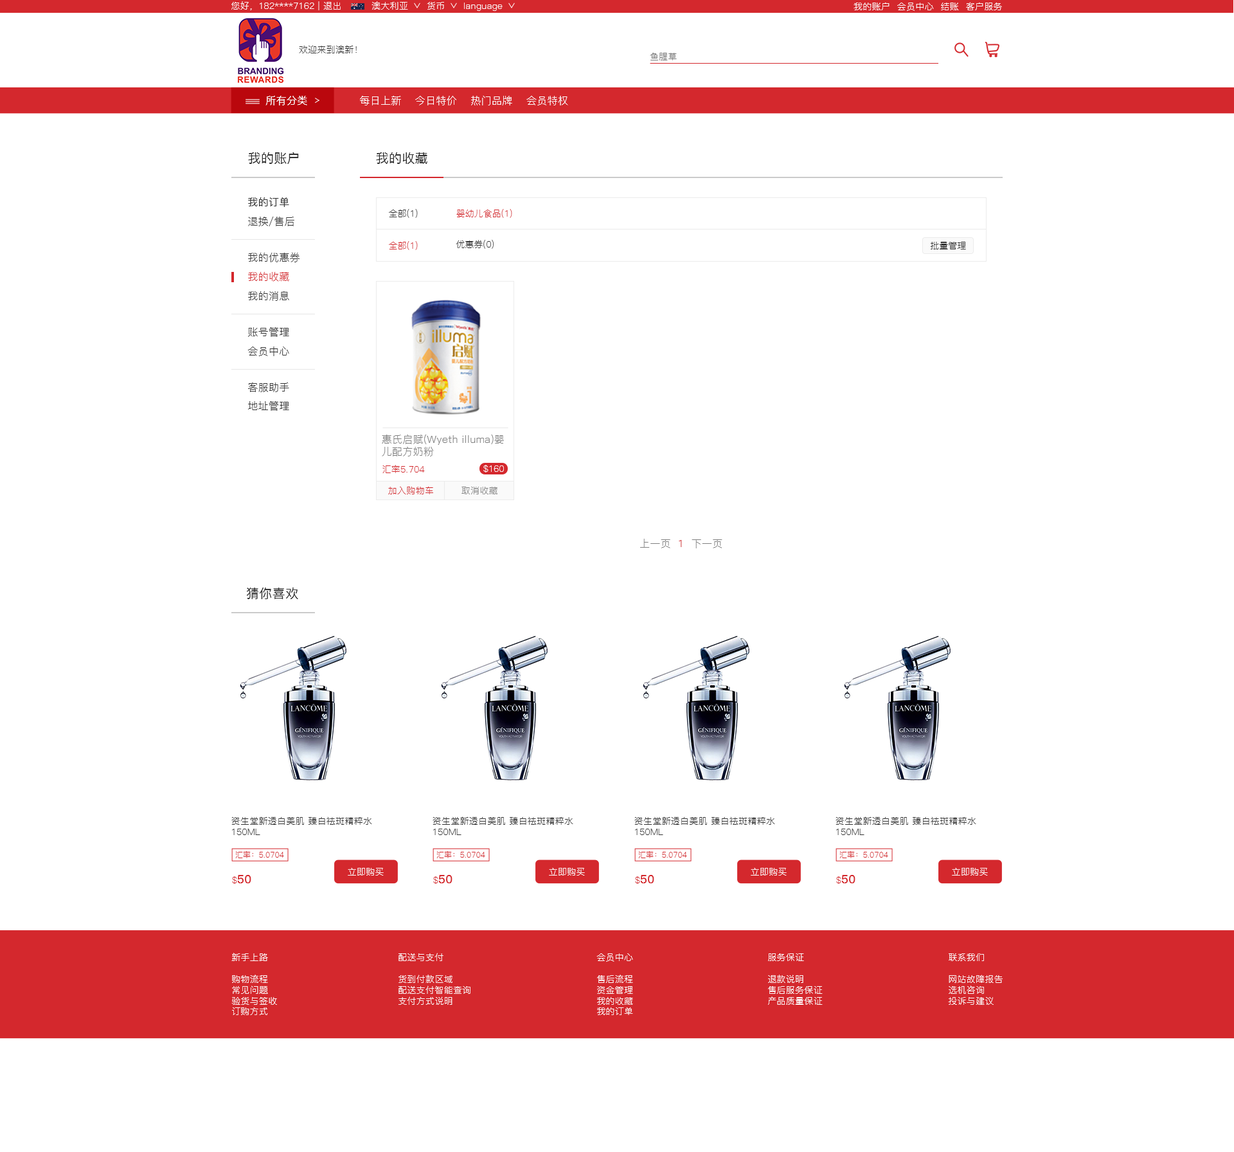
<style>
.page{position:relative;width:1234px;height:1152px;background:#ffffff}
.page>*{position:absolute;margin:0}
.t1{font:9px "PingFang-SC-Regular";letter-spacing:0.02em;color:#ffffff}
.t2{font:9px "PingFang-SC-Regular";letter-spacing:0.02em;color:#333333}
.t3{font:9px "PingFang-SC-Regular";letter-spacing:0.02em;color:#767676}
.t4{font:10.3px "PingFang-SC-Medium";letter-spacing:0.02em;color:#ffffff}
.t5{font:10.3px "PingFang-SC-Regular";letter-spacing:0.02em;color:#ffffff}
.t6{font:12.9px "PingFang-SC-Medium";letter-spacing:0.02em;color:#333333}
.t7{font:10.3px "PingFang-SC-Medium";letter-spacing:0.02em;color:#333333}
.t8{font:9px "PingFang-SC-Regular";color:#333333}
.t9{font:9px "PingFang-SC-Regular";color:#d4282d}
.t10{font:10.3px "PingFang-SC-Regular";letter-spacing:0.02em;color:#343434}
.t11{font:10.3px "PingFang-SC-Regular";letter-spacing:0.02em;color:#d4282d}
.t12{font:10.3px "PingFang-SC-Regular";letter-spacing:0.02em;color:#333333}
.t13{font:10.3px "PingFang-SC-Regular";letter-spacing:0.02em;color:#808080}
.t14{font:9px "PingFang-SC-Regular";letter-spacing:0.02em;color:#d4282d}
.t15{font:9px "PingFang-SC-Regular";letter-spacing:0.02em;color:#808080}
.t16{font:7.7px "PingFang-SC-Regular";letter-spacing:0.02em;color:#d4282d}
.t17{font:11.6px "PingFang-SC-Bold";letter-spacing:0.02em;color:#d4282d}
.t18{font:9px "PingFang-SC-Regular";letter-spacing:0.02em;color:#fffefe}
</style>
<div class="page">
<p class="t1" style="left:231px;top:1px;width:110px;height:9px">您好，182****7162 | 退出</p>
<p class="t1" style="left:372px;top:1px;width:36px;height:9px">澳大利亚</p>
<p class="t1" style="left:427px;top:2px;width:17px;height:8px">货币</p>
<p class="t1" style="left:464px;top:3px;width:39px;height:8px">language</p>
<p class="t1" style="left:854px;top:2px;width:148px;height:9px">我的账户  会员中心  结账  客户服务</p>
<p class="t2" style="left:299px;top:45px;width:58px;height:8px">欢迎来到澳新！</p>
<p class="t3" style="left:650px;top:53px;width:27px;height:7px">鱼腥草</p>
<p class="t4" style="left:266px;top:96px;width:41px;height:9px">所有分类</p>
<p class="t5" style="left:360px;top:96px;width:208px;height:9px">每日上新    今日特价    热门品牌    会员特权</p>
<p class="t6" style="left:248px;top:152px;width:51px;height:12px">我的账户</p>
<p class="t6" style="left:376px;top:152px;width:52px;height:12px">我的收藏</p>
<p class="t7" style="left:248px;top:197px;width:41px;height:10px">我的订单</p>
<p class="t8" style="left:389px;top:209px;width:29px;height:9px">全部(1)</p>
<p class="t9" style="left:456px;top:209px;width:56px;height:9px">婴幼儿食品(1)</p>
<p class="t10" style="left:248px;top:217px;width:46px;height:9px">退换/售后</p>
<p class="t9" style="left:389px;top:241px;width:29px;height:9px">全部(1)</p>
<p class="t8" style="left:456px;top:240px;width:38px;height:9px">优惠券(0)</p>
<p class="t8" style="left:931px;top:242px;width:35px;height:7px">批量管理</p>
<p class="t10" style="left:248px;top:253px;width:52px;height:9px">我的优惠券</p>
<p class="t11" style="left:248px;top:272px;width:41px;height:10px">我的收藏</p>
<p class="t10" style="left:248px;top:291px;width:41px;height:10px">我的消息</p>
<p class="t12" style="left:248px;top:327px;width:41px;height:10px">账号管理</p>
<p class="t10" style="left:248px;top:346px;width:41px;height:10px">会员中心</p>
<p class="t10" style="left:248px;top:382px;width:41px;height:10px">客服助手</p>
<p class="t12" style="left:248px;top:401px;width:41px;height:10px">地址管理</p>
<p class="t13" style="left:382px;top:435px;width:122px;height:21px">惠氏启赋(Wyeth illuma)婴<br>儿配方奶粉</p>
<p class="t14" style="left:382px;top:465px;width:43px;height:8px">汇率5.704</p>
<p class="t1" style="left:483px;top:465px;width:21px;height:8px">$160</p>
<p class="t14" style="left:388px;top:487px;width:45px;height:7px">加入购物车</p>
<p class="t15" style="left:462px;top:487px;width:36px;height:7px">取消收藏</p>
<p class="t13" style="left:640px;top:539px;width:83px;height:9px">上一页<span class="t11">  1  </span>下一页</p>
<p class="t6" style="left:247px;top:587px;width:51px;height:12px">猜你喜欢</p>
<p class="t2" style="left:231px;top:816px;width:141px;height:19px">资生堂新透白美肌 臻白祛斑精粹水<br>150ML</p>
<p class="t2" style="left:433px;top:816px;width:140px;height:19px">资生堂新透白美肌 臻白祛斑精粹水<br>150ML</p>
<p class="t2" style="left:634px;top:816px;width:141px;height:19px">资生堂新透白美肌 臻白祛斑精粹水<br>150ML</p>
<p class="t2" style="left:836px;top:816px;width:141px;height:19px">资生堂新透白美肌 臻白祛斑精粹水<br>150ML</p>
<p class="t16" style="left:235px;top:851px;width:49px;height:7px">汇率：5.0704</p>
<p class="t16" style="left:437px;top:851px;width:48px;height:7px">汇率：5.0704</p>
<p class="t16" style="left:638px;top:851px;width:49px;height:7px">汇率：5.0704</p>
<p class="t16" style="left:840px;top:851px;width:48px;height:7px">汇率：5.0704</p>
<p class="t1" style="left:348px;top:868px;width:36px;height:8px">立即购买</p>
<p class="t1" style="left:549px;top:868px;width:36px;height:8px">立即购买</p>
<p class="t1" style="left:751px;top:868px;width:36px;height:8px">立即购买</p>
<p class="t1" style="left:952px;top:868px;width:36px;height:8px">立即购买</p>
<p class="t17" style="left:232px;top:875px;width:19px;height:9px"><span class="t14">$</span>50</p>
<p class="t17" style="left:433px;top:875px;width:20px;height:9px"><span class="t14">$</span>50</p>
<p class="t17" style="left:635px;top:875px;width:19px;height:9px"><span class="t14">$</span>50</p>
<p class="t17" style="left:836px;top:875px;width:20px;height:9px"><span class="t14">$</span>50</p>
<p class="t18" style="left:231px;top:953px;width:46px;height:62px">新手上路<br><br>购物流程<br>常见问题<br>验货与签收<br>订购方式</p>
<p class="t18" style="left:399px;top:953px;width:72px;height:52px">配送与支付<br><br>货到付款区域<br>配送支付智能查询<br>支付方式说明</p>
<p class="t18" style="left:597px;top:953px;width:36px;height:62px">会员中心<br><br>售后流程<br>资金管理<br>我的收藏<br>我的订单</p>
<p class="t18" style="left:768px;top:953px;width:55px;height:52px">服务保证<br><br>退款说明<br>售后服务保证<br>产品质量保证</p>
<p class="t18" style="left:948px;top:953px;width:55px;height:52px">联系我们<br><br>网站故障报告<br>选机咨询<br>投诉与建议</p>
</div>
